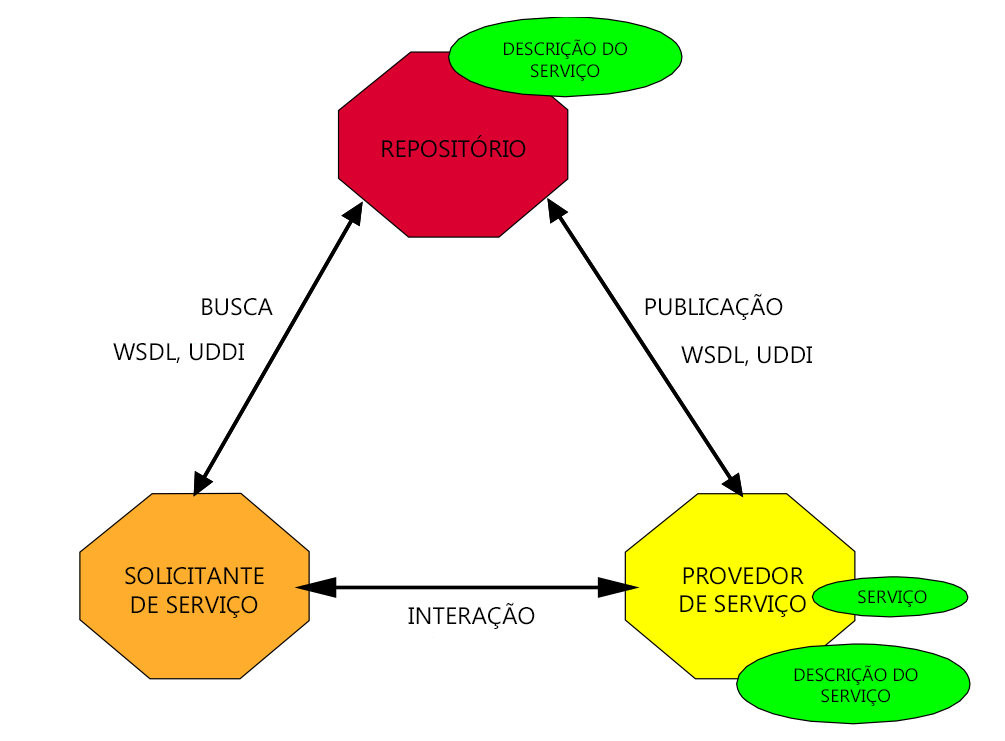
<style>
.page{position:relative;width:1005px;height:741px;background:#ffffff}
.page>*{position:absolute;margin:0}
.t1{font:18px "Gadugi";color:#000000}
.t2{font:24px "Gadugi";color:#000000}
</style>
<div class="page">
<p class="t1" style="left:504px;top:39px;width:123px;height:42px;text-align:center">DESCRIÇÃO DO<br>SERVIÇO</p>
<p class="t2" style="left:382px;top:135px;width:144px;height:23px">REPOSITÓRIO</p>
<p class="t2" style="left:645px;top:293px;width:138px;height:27px">PUBLICAÇÃO</p>
<p class="t2" style="left:202px;top:298px;width:71px;height:18px">BUSCA</p>
<p class="t2" style="left:113px;top:343px;width:131px;height:20px">WSDL, UDDI</p>
<p class="t2" style="left:681px;top:346px;width:131px;height:20px">WSDL, UDDI</p>
<p class="t2" style="left:125px;top:567px;width:139px;height:51px;text-align:center">SOLICITANTE<br>DE SERVIÇO</p>
<p class="t2" style="left:680px;top:567px;width:126px;height:50px;text-align:center">PROVEDOR<br>DE SERVIÇO</p>
<p class="t1" style="left:858px;top:590px;width:69px;height:17px">SERVIÇO</p>
<p class="t2" style="left:408px;top:602px;width:127px;height:27px">INTERAÇÃO</p>
<p class="t1" style="left:794px;top:665px;width:124px;height:41px;text-align:center">DESCRIÇÃO DO<br>SERVIÇO</p>
</div>
